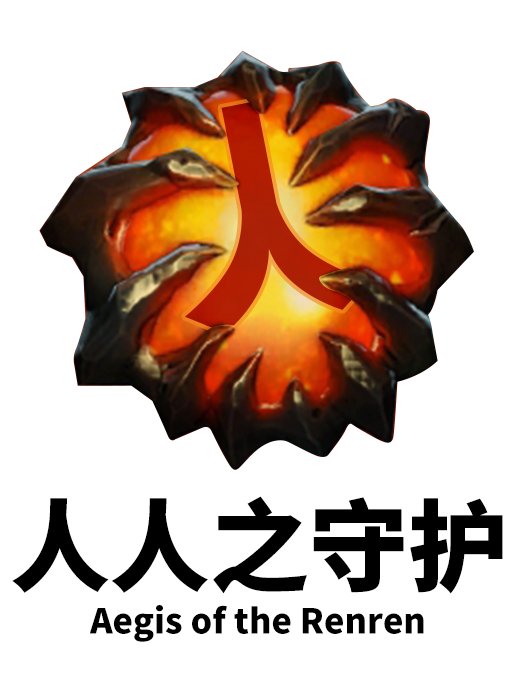
<style>
.page{position:relative;width:512px;height:691px;background:#ffffff}
.page>*{position:absolute;margin:0}
.t1{font:99.6px "SourceHanSansCN-Heavy";color:#000000}
.t2{font:34.3px "SourceHanSansCN-Heavy";color:#000000}
</style>
<div class="page">
<p class="t1" style="left:12px;top:496px;width:491px;height:98px">人人之守护</p>
<p class="t2" style="left:89px;top:605px;width:335px;height:37px">Aegis of the Renren</p>
</div>
